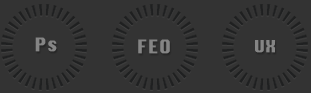
<style>
.page{position:relative;width:311px;height:93px;background:#333333}
.page>*{position:absolute;margin:0}
.t1{font:18px "Krungthep";color:#858585;font-weight:bold}
.t2{font:16px "Krungthep";color:#858585;font-weight:bold}
</style>
<div class="page">
<p class="t1" style="left:35px;top:37px;width:22px;height:15px">Ps</p>
<p class="t1" style="left:138px;top:39px;width:32px;height:15px">FEO</p>
<p class="t2" style="left:255px;top:40px;width:20px;height:13px">UX</p>
</div>
